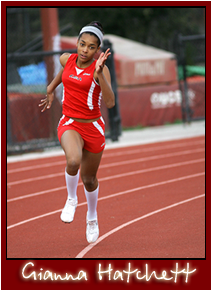
<style>
.page{position:relative;width:212px;height:291px}
.page>*{position:absolute;margin:0}
.t1{font:25px "BetinaScript";color:#ffffff}
</style>
<div class="page">
<p class="t1" style="left:22px;top:262px;width:175px;height:21px">Gianna Hatchett</p>
</div>
